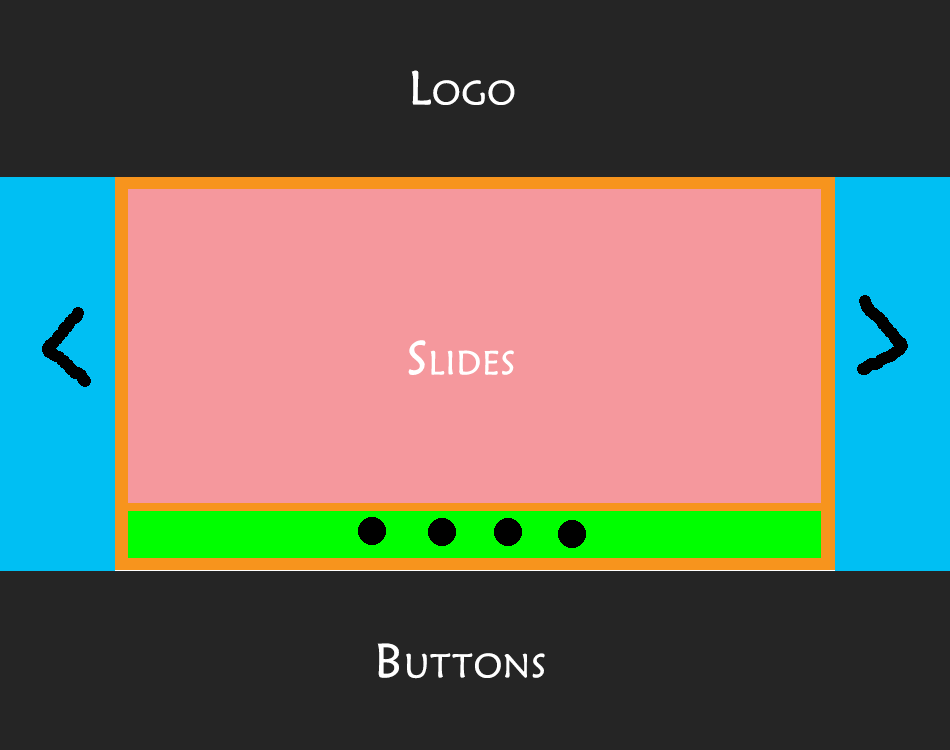
<style>
.page{position:relative;width:950px;height:750px;background:#252525}
.page>*{position:absolute;margin:0}
.t1{font:48px "MaiandraGD-Regular";letter-spacing:0.025em;color:#ffffff;font-variant:small-caps}
</style>
<div class="page">
<p class="t1" style="left:411px;top:70px;width:104px;height:35px">Logo</p>
<p class="t1" style="left:408px;top:340px;width:106px;height:35px">Slides</p>
<p class="t1" style="left:377px;top:643px;width:168px;height:36px">Buttons</p>
</div>
